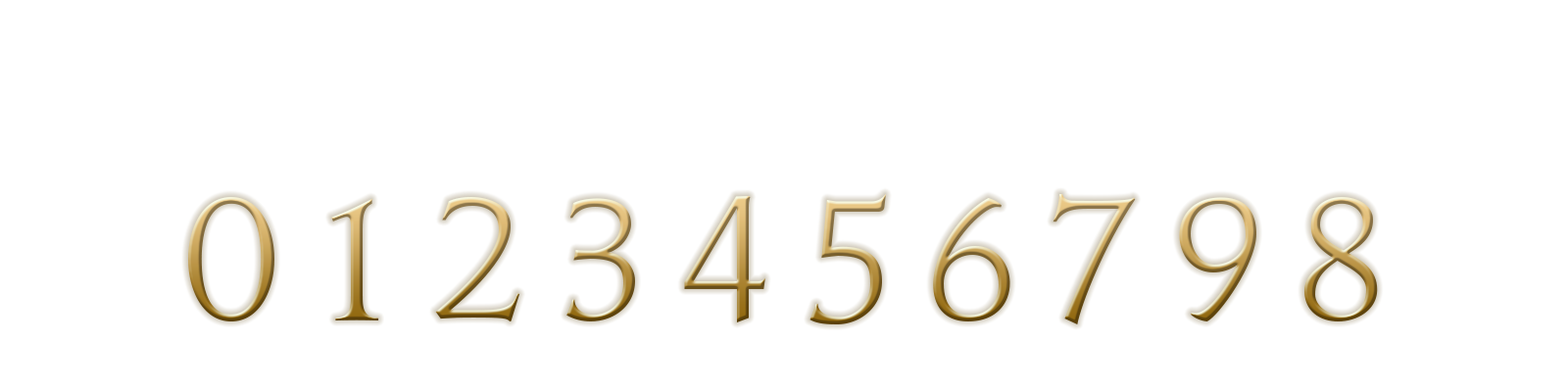
<style>
.page{position:relative;width:1568px;height:392px;background:#ffffff}
.page>*{position:absolute;margin:0}
.t1{font:152.9px "JupiterPro"}
</style>
<div class="page">
<p class="t1" style="left:566px;top:198px;width:69px;height:123px">3</p>
<p class="t1" style="left:684px;top:196px;width:81px;height:126px">4</p>
<p class="t1" style="left:809px;top:194px;width:77px;height:130px">5</p>
<p class="t1" style="left:933px;top:198px;width:77px;height:123px">6</p>
<p class="t1" style="left:1179px;top:197px;width:77px;height:124px">9</p>
<p class="t1" style="left:1304px;top:197px;width:74px;height:124px">8</p>
</div>
